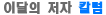
<style>
.page{position:relative;width:106px;height:15px;background:#ffffff}
.page>*{position:absolute;margin:0}
.t1{font:12.5px "HeadlineR-HM";color:#6a6a6a}
.t2{font:12.5px "HeadlineR-HM";color:#0078ff}
</style>
<div class="page">
<p class="t1" style="left:4px;top:1px;width:99px;height:13px">이달의 저자 <span class="t2">칼럼</span></p>
</div>
